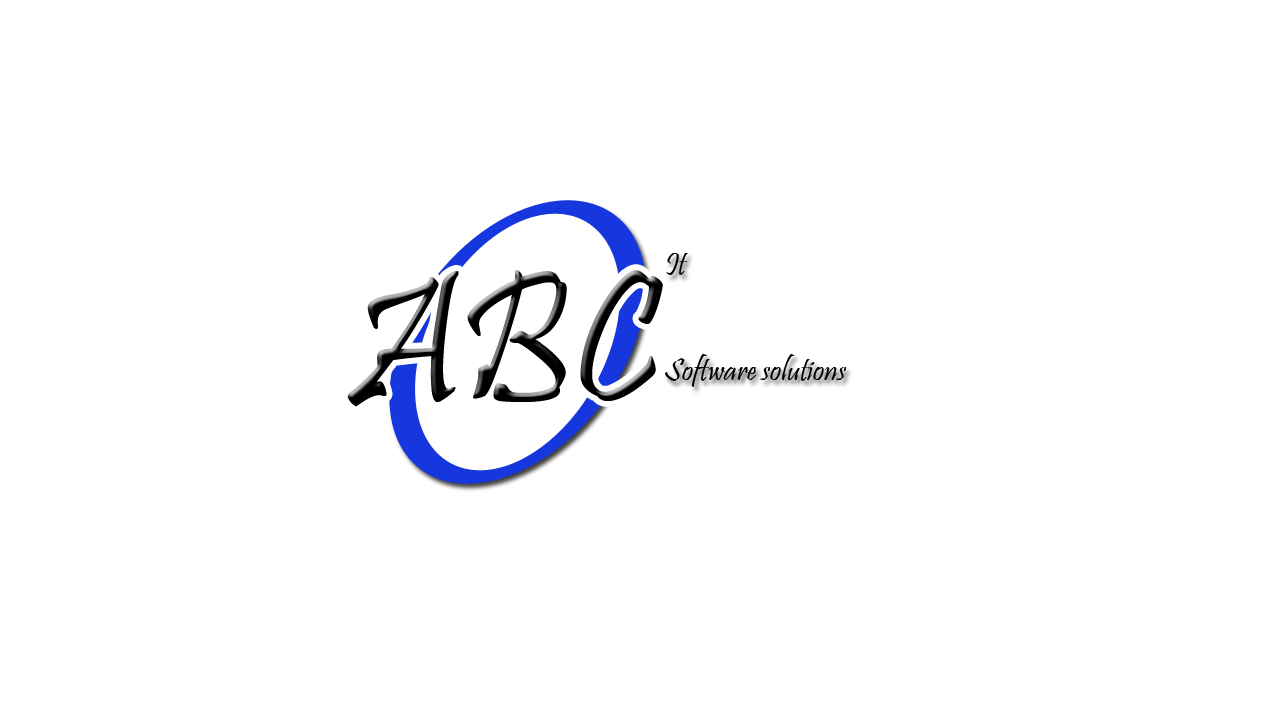
<style>
.page{position:relative;width:1278px;height:719px;background:#ffffff}
.page>*{position:absolute;margin:0}
.t1{font:32px "Pristina-Regular";color:#000000}
.t2{font:190.5px "Pristina-Regular";color:#000000;scale:0.91 1}
</style>
<div class="page">
<p class="t1" style="left:666px;top:253px;width:22px;height:22px">It</p>
<p class="t2" style="left:347px;top:270px;width:316px;height:137px">ABC</p>
<p class="t1" style="left:665px;top:354px;width:181px;height:33px">Software solutions</p>
</div>
